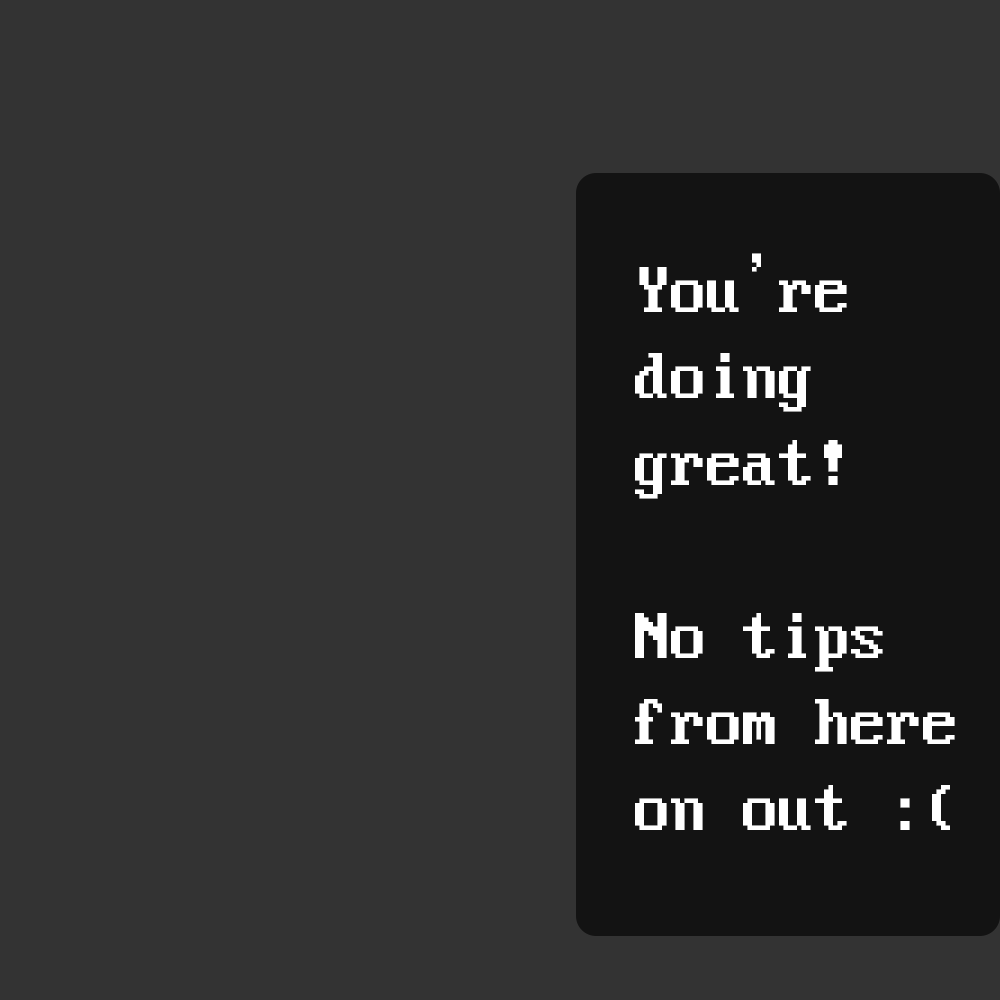
<style>
.page{position:relative;width:1000px;height:1000px;background:#333333}
.page>*{position:absolute;margin:0}
.t1{font:72px "ClassicConsoleNeue";color:#ffffff}
</style>
<div class="page">
<p class="t1" style="left:635px;top:253px;width:320px;height:577px;text-align:justify">You’re<br>doing<br>great!<br><br>No tips<br>from here<br>on out :(</p>
</div>
